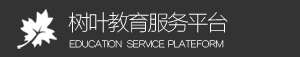
<style>
.page{position:relative;width:300px;height:57px;background:#333333}
.page>*{position:absolute;margin:0}
.t1{font:22px "FZLTCXHJW--GB1-0";letter-spacing:-0.1em;color:#ffffff}
.t2{font:9px "FZLTCXHJW--GB1-0";letter-spacing:-0.1em;color:#ffffff}
</style>
<div class="page">
<p class="t1" style="left:68px;top:12px;width:160px;height:21px">树叶教育服务平台</p>
<p class="t2" style="left:69px;top:40px;width:155px;height:8px">EDUCATION   SERVICE  PLATEFORM</p>
</div>
